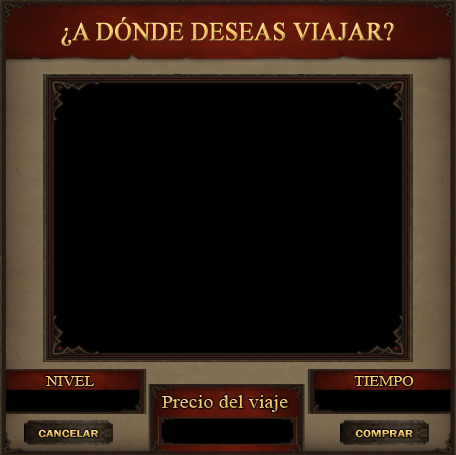
<style>
.page{position:relative;width:456px;height:455px;background:#000000}
.page>*{position:absolute;margin:0}
.t1{font:25.7px "TimesNewRomanPSMT";text-transform:uppercase;font-weight:bold;scale:0.95 1}
.t2{font:14.7px "TimesNewRomanPSMT";scale:1.09 1}
.t3{font:18.7px "TimesNewRomanPSMT";scale:1.09 1}
.t4{font:10.5px "FranklinGothic-Demi";scale:1.19 1}
</style>
<div class="page">
<p class="t1" style="left:61px;top:17px;width:333px;height:29px">¿A dónde deseas viajar?</p>
<p class="t2" style="left:45px;top:376px;width:50px;height:10px">NIVEL</p>
<p class="t2" style="left:354px;top:376px;width:60px;height:10px">TIEMPO</p>
<p class="t3" style="left:162px;top:395px;width:126px;height:17px">Precio del viaje</p>
<p class="t4" style="left:38px;top:429px;width:60px;height:9px">CANCELAR</p>
<p class="t4" style="left:355px;top:429px;width:58px;height:9px">COMPRAR</p>
</div>
